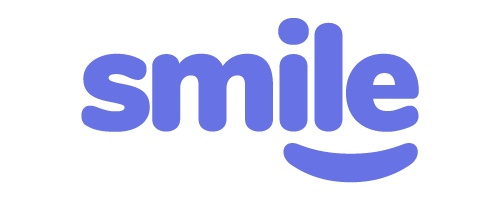
<style>
.page{position:relative;width:487px;height:200px;background:#ffffff}
.page>*{position:absolute;margin:0}
.t1{font:150px "Nunito-Black";letter-spacing:-0.075em;color:#6772e5;font-weight:bold}
</style>
<div class="page">
<p class="t1" style="left:81px;top:18px;width:338px;height:114px">smile</p>
<p class="t1" style="left:283px;top:143px;width:135px;height:40px;rotate:-90deg">(</p>
</div>
